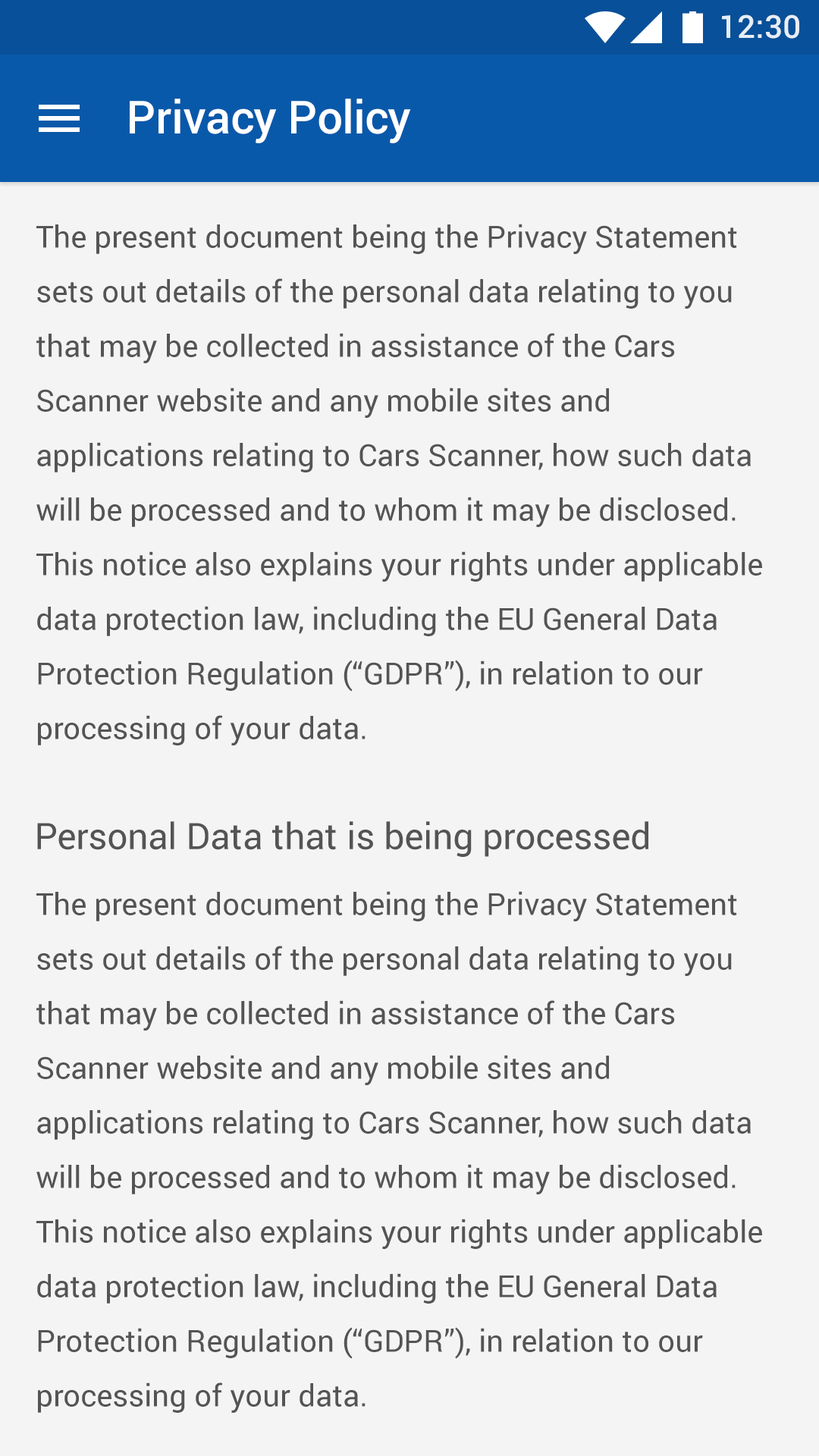
<style>
.page{position:relative;width:819px;height:1456px;background:#f4f4f4}
.page>*{position:absolute;margin:0}
.t1{font:31.8px "Roboto-Medium";color:#e7eef5}
.t2{font:45.5px "Roboto-Medium";color:#ffffff}
.t3{font:30.3px/54.6px "Roboto-Regular";color:#545454}
.t4{font:36.4px "Roboto-Regular";color:#545454}
</style>
<div class="page">
<p class="t1" style="left:722px;top:14px;width:77px;height:25px">12:30</p>
<p class="t2" style="left:130px;top:99px;width:281px;height:44px">Privacy Policy</p>
<p class="t3" style="left:36px;top:224px;width:726px;height:521px">The present document being the Privacy Statement sets out details of the personal data relating to you that may be collected in assistance of the Cars Scanner website and any mobile sites and applications relating to Cars Scanner, how such data will be processed and to whom it may be disclosed. This notice also explains your rights under applicable data protection law, including the EU General Data Protection Regulation (“GDPR”), in relation to our processing of your data.</p>
<p class="t4" style="left:37px;top:821px;width:611px;height:36px">Personal Data that is being processed</p>
<p class="t3" style="left:36px;top:891px;width:726px;height:522px">The present document being the Privacy Statement sets out details of the personal data relating to you that may be collected in assistance of the Cars Scanner website and any mobile sites and applications relating to Cars Scanner, how such data will be processed and to whom it may be disclosed. This notice also explains your rights under applicable data protection law, including the EU General Data Protection Regulation (“GDPR”), in relation to our processing of your data.</p>
</div>
